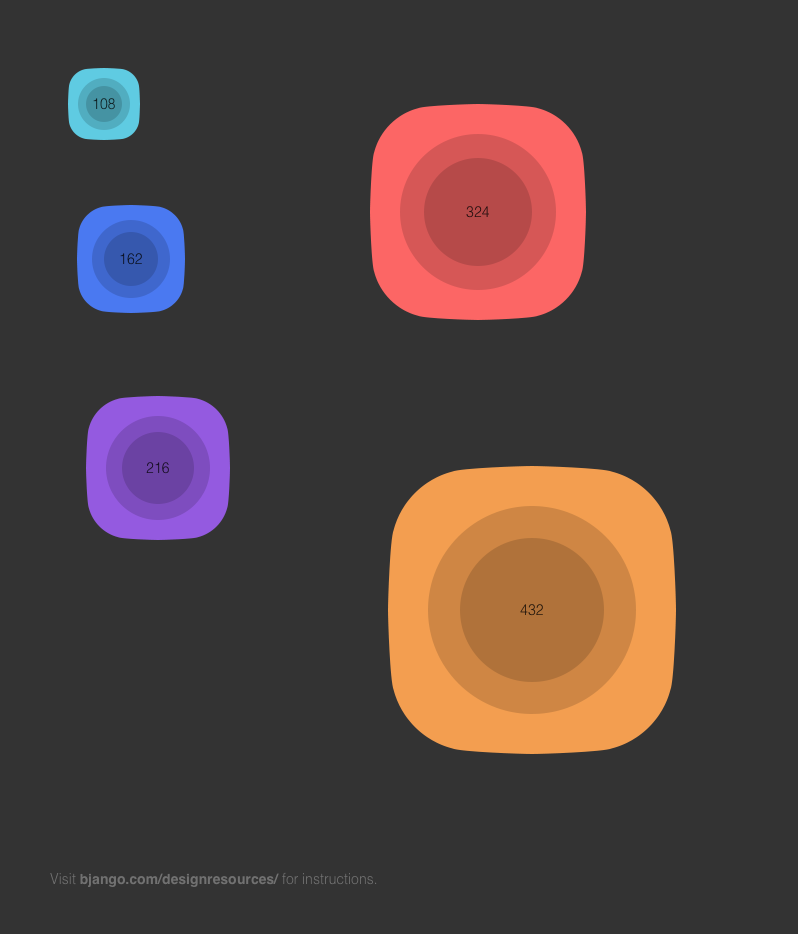
<style>
.page{position:relative;width:798px;height:934px;background:#333333}
.page>*{position:absolute;margin:0}
.t1{font:14px "Helvetica-Light";color:#0e1d21}
.t2{font:12px "MyriadPro-Regular";color:#240f0f}
.t3{font:14px "Helvetica-Light";color:#0b1223}
.t4{font:14px "Helvetica-Light";color:#150d21}
.t5{font:12px "MyriadPro-Regular";color:#23170c}
.t6{font:14px "Helvetica-Bold";color:#808080}
.t7{font:14px "Helvetica-Light";color:#808080}
</style>
<div class="page">
<p class="t1" style="left:93px;top:98px;width:22px;height:12px">108</p>
<p class="t2" style="left:466px;top:206px;width:23px;height:12px">324</p>
<p class="t3" style="left:120px;top:253px;width:22px;height:12px">162</p>
<p class="t4" style="left:146px;top:462px;width:23px;height:12px">216</p>
<p class="t5" style="left:520px;top:604px;width:23px;height:12px">432</p>
<p class="t6" style="left:50px;top:872px;width:327px;height:15px"><span class="t7">Visit </span>bjango.com/designresources/ <span class="t7">for instructions.</span></p>
</div>
